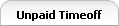
<style>
.page{position:relative;width:119px;height:26px;background:#ffffff}
.page>*{position:absolute;margin:0}
.t1{font:11px "Tahoma-Bold";color:#000000}
</style>
<div class="page">
<p class="t1" style="left:17px;top:10px;width:85px;height:11px">Unpaid Timeoff</p>
</div>
